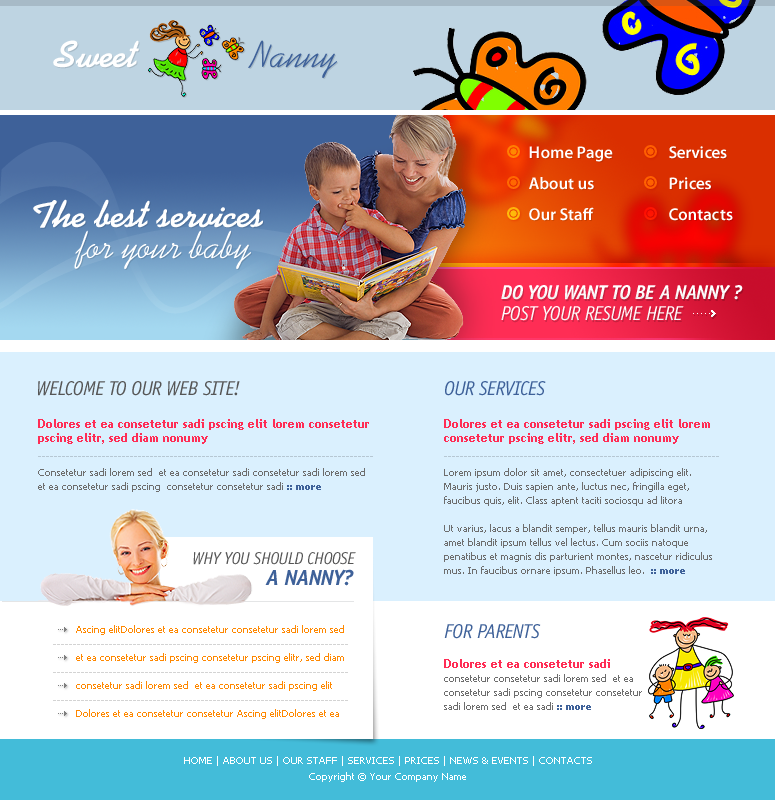
<style>
.page{position:relative;width:775px;height:800px;background:#daf0fe}
.page>*{position:absolute;margin:0}
.t1{font:17px "MyriadPro-Semibold";color:#ffffff}
.t2{font:38px "KaufmannStd-Bold";color:#ffffff}
.t3{font:38px "KaufmannStd";color:#ffffff}
.t4{font:20px "OfficinaSansStd-BoldItalic";letter-spacing:-0.04em;color:#fcfcfc;text-transform:uppercase}
.t5{font:20px "OfficinaSansStd-BookItalic";letter-spacing:-0.04em;color:#fbfbfb;text-transform:uppercase}
.t6{font:20px "OfficinaSansStd-BookItalic";letter-spacing:-0.04em;color:#565656;text-transform:uppercase}
.t7{font:20px "OfficinaSansStd-BookItalic";letter-spacing:-0.04em;color:#3e6199;text-transform:uppercase}
.t8{font:12px/14px "TrebuchetMS-Bold";color:#ff2d55}
.t9{font:10px "Tahoma";color:#b6c7d3}
.t10{font:10px/14px "Tahoma";color:#6d6d6d}
.t11{font:10px/14px "Tahoma-Bold";color:#3e6199}
.t12{font:17px "OfficinaSansStd-BookItalic";letter-spacing:-0.04em;color:#565656;text-transform:uppercase}
.t13{font:22px "OfficinaSansStd-BoldItalic";letter-spacing:-0.04em;color:#3e6199;text-transform:uppercase}
.t14{font:10px/28px "Tahoma";color:#ff8800}
.t15{font:10px "Tahoma";color:#d3d3d3}
.t16{font:10px/16px "Tahoma";color:#ffffff}
</style>
<div class="page">
<p class="t1" style="left:529px;top:146px;width:84px;height:16px">Home Page</p>
<p class="t1" style="left:669px;top:146px;width:58px;height:13px">Services</p>
<p class="t1" style="left:529px;top:177px;width:65px;height:13px">About us</p>
<p class="t1" style="left:669px;top:177px;width:42px;height:13px">Prices</p>
<p class="t2" style="left:33px;top:199px;width:230px;height:29px">The best services</p>
<p class="t1" style="left:529px;top:207px;width:65px;height:14px">Our Staff</p>
<p class="t1" style="left:669px;top:208px;width:64px;height:13px">Contacts</p>
<p class="t3" style="left:74px;top:230px;width:177px;height:39px">for your baby</p>
<p class="t4" style="left:501px;top:285px;width:242px;height:15px">Do you want to be a nanny ?</p>
<p class="t5" style="left:501px;top:306px;width:183px;height:15px">post your resume here</p>
<p class="t6" style="left:38px;top:381px;width:202px;height:15px">Welcome to our web site!</p>
<p class="t7" style="left:445px;top:381px;width:101px;height:15px">OUR SERVICES</p>
<p class="t8" style="left:38px;top:419px;width:331px;height:25px">Dolores et ea consetetur sadi pscing elit lorem consetetur pscing elitr, sed diam nonumy</p>
<p class="t8" style="left:444px;top:419px;width:266px;height:25px">Dolores et ea consetetur sadi pscing elit lorem consetetur pscing elitr, sed diam nonumy</p>
<p class="t9" style="left:38px;top:456px;width:335px;height:1px">------------------------------------------------------------------------------------</p>
<p class="t9" style="left:444px;top:456px;width:275px;height:1px">---------------------------------------------------------------------</p>
<p class="t10" style="left:38px;top:468px;width:327px;height:24px">Consetetur sadi lorem sed  et ea consetetur sadi consetetur sadi lorem sed  et ea consetetur sadi pscing  consetetur consetetur sadi <span class="t11">:: more</span></p>
<p class="t10" style="left:444px;top:468px;width:268px;height:108px">Lorem ipsum dolor sit amet, consectetuer adipiscing elit. Mauris justo. Duis sapien ante, luctus nec, fringilla eget, faucibus quis, elit. Class aptent taciti sociosqu ad litora <br><br>Ut varius, lacus a blandit semper, tellus mauris blandit urna, amet blandit ipsum tellus vel lectus. Cum sociis natoque penatibus et magnis dis parturient montes, nascetur ridiculus mus. In faucibus ornare ipsum. Phasellus leo.  <span class="t11">:: more</span></p>
<p class="t12" style="left:193px;top:552px;width:163px;height:13px">WHY YOU SHOULD CHOOSE</p>
<p class="t13" style="left:265px;top:569px;width:89px;height:17px">A NANNY?</p>
<p class="t14" style="left:76px;top:625px;width:268px;height:94px">Ascing elitDolores et ea consetetur consetetur sadi lorem sed  et ea consetetur sadi pscing consetetur pscing elitr, sed diam consetetur sadi lorem sed  et ea consetetur sadi pscing elit Dolores et ea consetetur consetetur Ascing elitDolores et ea</p>
<p class="t7" style="left:444px;top:624px;width:97px;height:15px">fOR PARENTS</p>
<p class="t15" style="left:53px;top:644px;width:295px;height:1px">--------------------------------------------------------------------------</p>
<p class="t10" style="left:444px;top:659px;width:198px;height:51px"><span class="t8">Dolores et ea consetetur sadi <br></span>consetetur consetetur sadi lorem sed  et ea consetetur sadi pscing consetetur consetetur sadi lorem sed  et ea sadi <span class="t11">:: more</span></p>
<p class="t15" style="left:53px;top:672px;width:295px;height:1px">--------------------------------------------------------------------------</p>
<p class="t15" style="left:53px;top:700px;width:295px;height:1px">--------------------------------------------------------------------------</p>
<p class="t16" style="left:184px;top:756px;width:408px;height:26px;text-align:center">HOME | ABOUT US | OUR STAFF | SERVICES | PRICES | NEWS &amp; EVENTS | CONTACTS<br>Copyright © Your Company Name</p>
</div>
